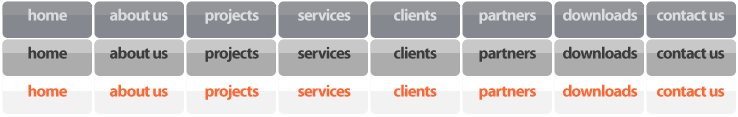
<style>
.page{position:relative;width:738px;height:117px}
.page>*{position:absolute;margin:0}
.t1{font:16.7px "MyriadPro-Bold";letter-spacing:-0.05em;color:#dadbdd}
.t2{font:16.7px "MyriadPro-Bold";letter-spacing:-0.05em;color:#3d3d3d}
.t3{font:16.7px "MyriadPro-Bold";letter-spacing:-0.05em;color:#ff6633}
</style>
<div class="page">
<p class="t1" style="left:28px;top:8px;width:39px;height:13px">home</p>
<p class="t1" style="left:110px;top:8px;width:58px;height:13px">about us</p>
<p class="t1" style="left:205px;top:8px;width:54px;height:16px">projects</p>
<p class="t1" style="left:298px;top:8px;width:53px;height:13px">services</p>
<p class="t1" style="left:394px;top:8px;width:43px;height:13px">clients</p>
<p class="t1" style="left:479px;top:10px;width:57px;height:14px">partners</p>
<p class="t1" style="left:563px;top:8px;width:75px;height:13px">downloads</p>
<p class="t1" style="left:657px;top:10px;width:68px;height:11px">contact us</p>
<p class="t2" style="left:28px;top:46px;width:39px;height:13px">home</p>
<p class="t2" style="left:110px;top:46px;width:58px;height:13px">about us</p>
<p class="t2" style="left:205px;top:46px;width:54px;height:16px">projects</p>
<p class="t2" style="left:298px;top:46px;width:53px;height:13px">services</p>
<p class="t2" style="left:394px;top:46px;width:43px;height:13px">clients</p>
<p class="t2" style="left:479px;top:48px;width:57px;height:14px">partners</p>
<p class="t2" style="left:563px;top:46px;width:75px;height:13px">downloads</p>
<p class="t2" style="left:657px;top:48px;width:68px;height:11px">contact us</p>
<p class="t3" style="left:28px;top:84px;width:39px;height:13px">home</p>
<p class="t3" style="left:110px;top:84px;width:58px;height:13px">about us</p>
<p class="t3" style="left:205px;top:84px;width:54px;height:16px">projects</p>
<p class="t3" style="left:298px;top:84px;width:53px;height:13px">services</p>
<p class="t3" style="left:394px;top:84px;width:43px;height:13px">clients</p>
<p class="t3" style="left:479px;top:86px;width:57px;height:14px">partners</p>
<p class="t3" style="left:563px;top:84px;width:75px;height:13px">downloads</p>
<p class="t3" style="left:657px;top:86px;width:68px;height:11px">contact us</p>
</div>
